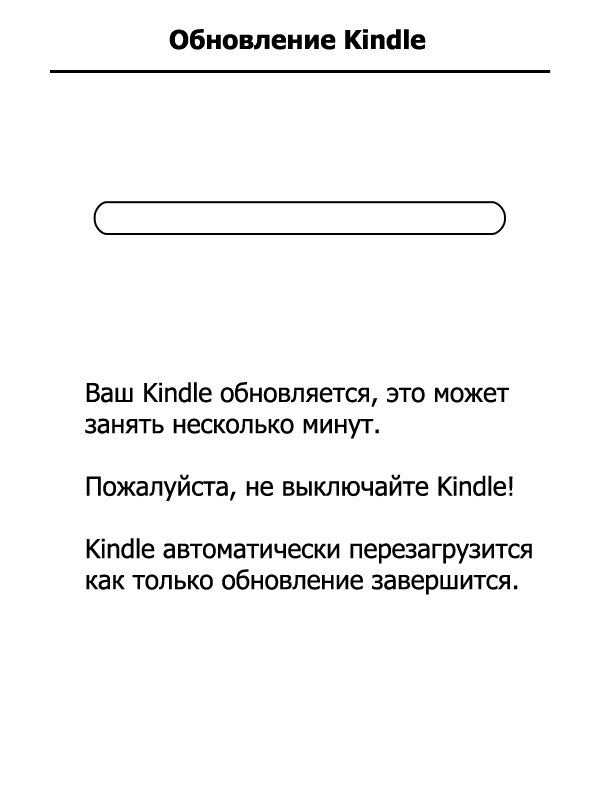
<style>
.page{position:relative;width:600px;height:800px;background:#ffffff}
.page>*{position:absolute;margin:0}
.t1{font:26px "Tahoma-Bold";color:#000000}
.t2{font:26px "Tahoma";color:#000000}
</style>
<div class="page">
<p class="t1" style="left:169px;top:29px;width:257px;height:21px">Обновление Kindle</p>
<p class="t2" style="left:85px;top:382px;width:447px;height:213px">Ваш Kindle обновляется, это может<br>занять несколько минут.<br><br>Пожалуйста, не выключайте Kindle!<br><br>Kindle автоматически перезагрузится <br>как только обновление завершится.</p>
</div>
